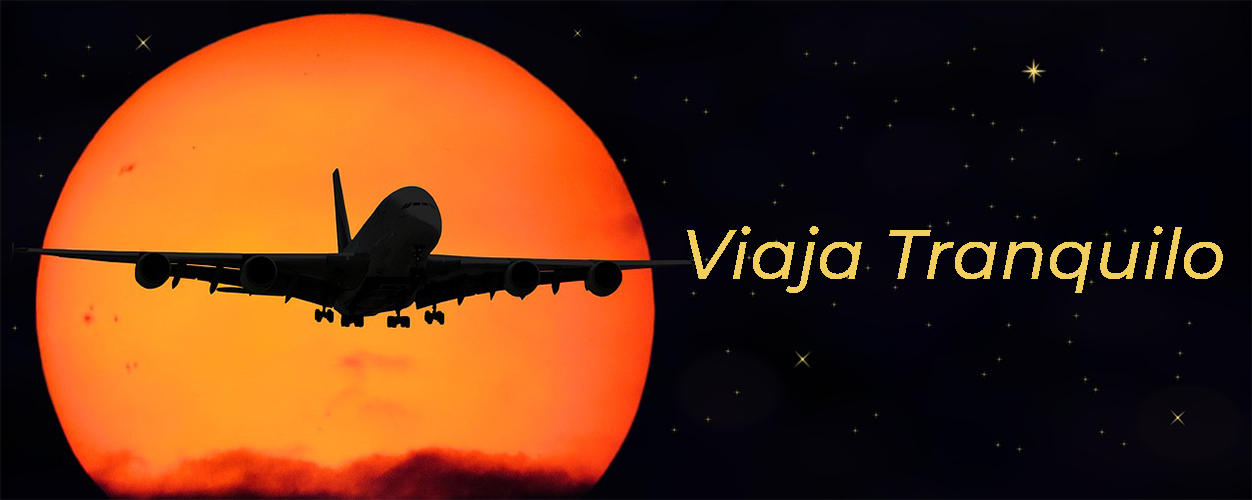
<style>
.page{position:relative;width:1252px;height:500px}
.page>*{position:absolute;margin:0}
.t1{font:70px "Montserrat-MediumItalic";color:#f2ce5c}
</style>
<div class="page">
<p class="t1" style="left:687px;top:226px;width:536px;height:67px">Viaja Tranquilo</p>
</div>
